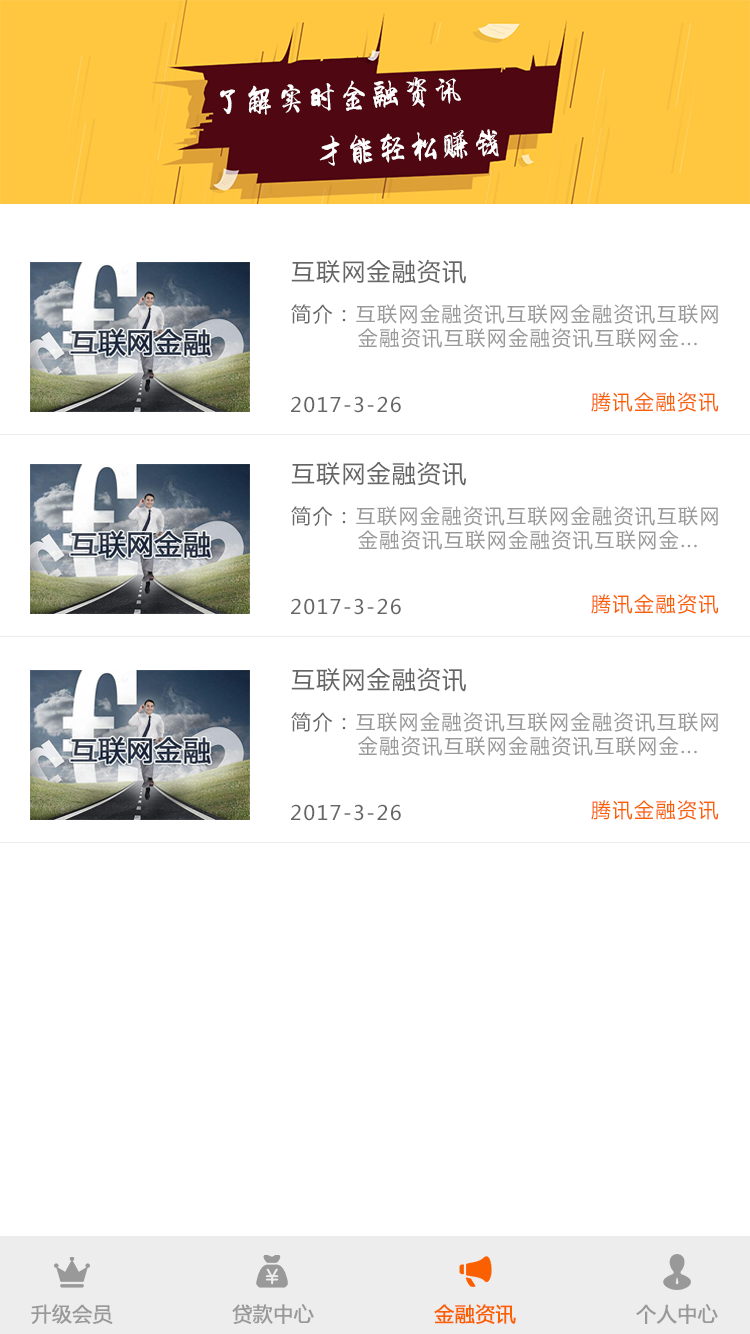
<style>
.page{position:relative;width:750px;height:1334px;background:#ffffff}
.page>*{position:absolute;margin:0}
.t1{font:30px/18px "LiXuKe";letter-spacing:0.05em;color:#ffffff}
.t2{font:24px "MicrosoftYaHei";letter-spacing:0.05em;color:#666666}
.t3{font:20px/24px "MicrosoftYaHei";letter-spacing:0.075em;color:#999999}
.t4{font:20px/24px "MicrosoftYaHei";letter-spacing:0.075em;color:#666666}
.t5{font:20px "MicrosoftYaHei";letter-spacing:0.075em;color:#666666}
.t6{font:20px "MicrosoftYaHei";letter-spacing:0.075em;color:#fb6000}
.t7{font:20px "MicrosoftYaHei";color:#999999;font-weight:bold}
.t8{font:20px "MicrosoftYaHei";color:#fb6000;font-weight:bold}
</style>
<div class="page">
<p class="t1" style="left:220px;top:77px;width:279px;height:89px;rotate:-3deg">了解实时金融资讯<br>           <br>     <br>       才能轻松赚钱</p>
<p class="t2" style="left:291px;top:259px;width:175px;height:25px">互联网金融资讯</p>
<p class="t3" style="left:291px;top:304px;width:427px;height:44px"><span class="t4">简介：</span>互联网金融资讯互联网金融资讯互联网<br>         金融资讯互联网金融资讯互联网金...</p>
<p class="t5" style="left:291px;top:396px;width:110px;height:17px">2017-3-26</p>
<p class="t6" style="left:591px;top:392px;width:128px;height:20px">腾讯金融资讯</p>
<p class="t2" style="left:291px;top:461px;width:175px;height:25px">互联网金融资讯</p>
<p class="t3" style="left:291px;top:506px;width:427px;height:44px"><span class="t4">简介：</span>互联网金融资讯互联网金融资讯互联网<br>         金融资讯互联网金融资讯互联网金...</p>
<p class="t5" style="left:291px;top:598px;width:110px;height:17px">2017-3-26</p>
<p class="t6" style="left:591px;top:594px;width:128px;height:20px">腾讯金融资讯</p>
<p class="t2" style="left:291px;top:667px;width:175px;height:25px">互联网金融资讯</p>
<p class="t3" style="left:291px;top:712px;width:427px;height:44px"><span class="t4">简介：</span>互联网金融资讯互联网金融资讯互联网<br>         金融资讯互联网金融资讯互联网金...</p>
<p class="t5" style="left:291px;top:804px;width:110px;height:17px">2017-3-26</p>
<p class="t6" style="left:591px;top:800px;width:128px;height:20px">腾讯金融资讯</p>
<p class="t7" style="left:31px;top:1304px;width:82px;height:20px">升级会员</p>
<p class="t7" style="left:232px;top:1304px;width:82px;height:20px">贷款中心</p>
<p class="t8" style="left:434px;top:1304px;width:82px;height:20px">金融资讯</p>
<p class="t7" style="left:636px;top:1304px;width:82px;height:20px">个人中心</p>
</div>
